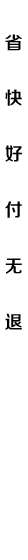
<style>
.page{position:relative;width:28px;height:560px;background:#ffffff}
.page>*{position:absolute;margin:0}
.t1{font:18px "FZZZHONGJW--GB1-0";color:#000000}
</style>
<div class="page">
<p class="t1" style="left:5px;top:34px;width:17px;height:17px">省</p>
<p class="t1" style="left:5px;top:89px;width:17px;height:17px">快</p>
<p class="t1" style="left:5px;top:145px;width:17px;height:17px">好</p>
<p class="t1" style="left:5px;top:201px;width:17px;height:17px">付</p>
<p class="t1" style="left:5px;top:258px;width:17px;height:16px">无</p>
<p class="t1" style="left:5px;top:313px;width:17px;height:17px">退</p>
</div>
